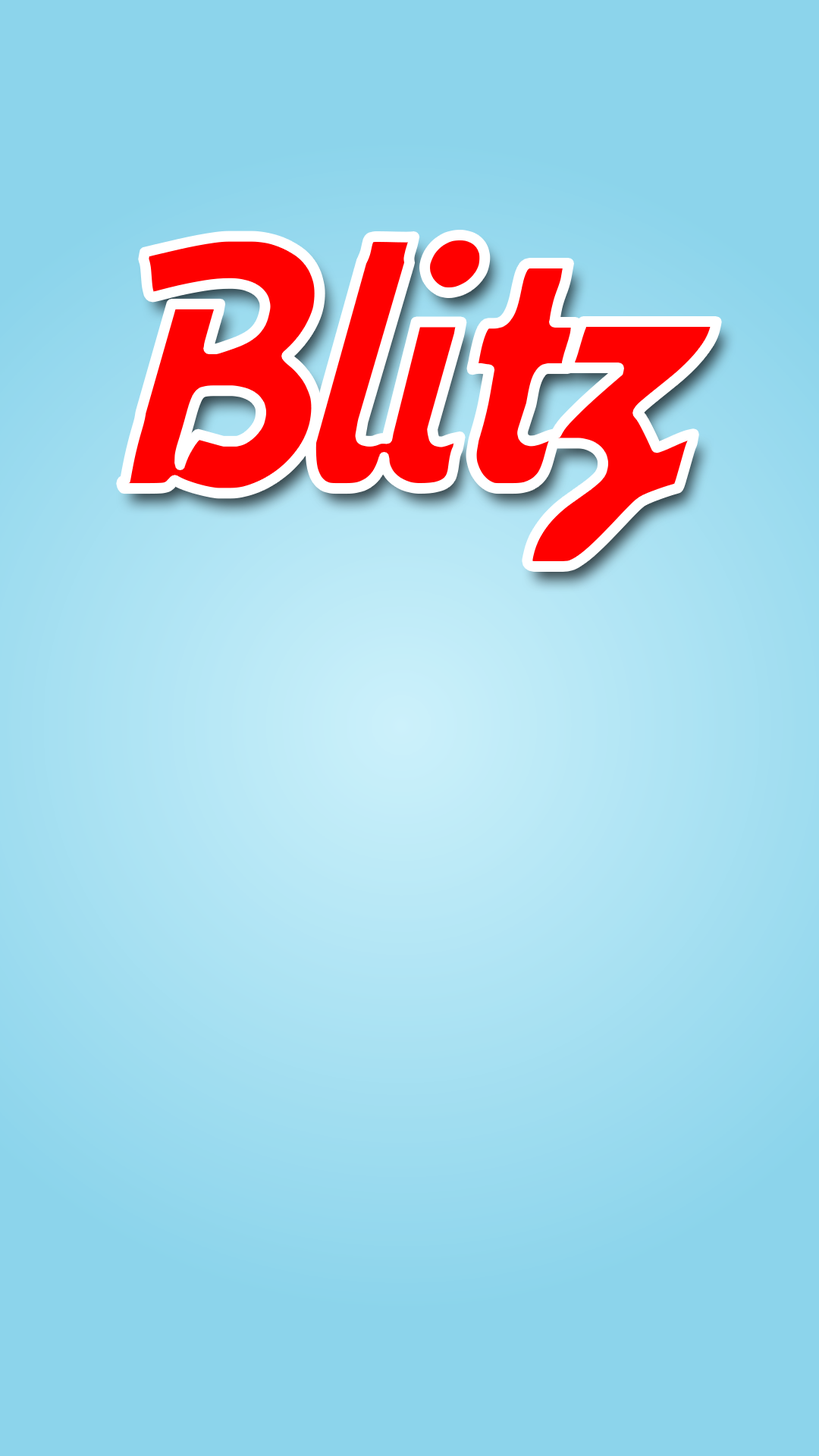
<style>
.page{position:relative;width:819px;height:1456px;background:#8cd4eb}
.page>*{position:absolute;margin:0}
.t1{font:251.7px "MachineScript";color:#ff0000;font-style:italic}
</style>
<div class="page">
<p class="t1" style="left:121px;top:235px;width:596px;height:331px">Blitz</p>
</div>
